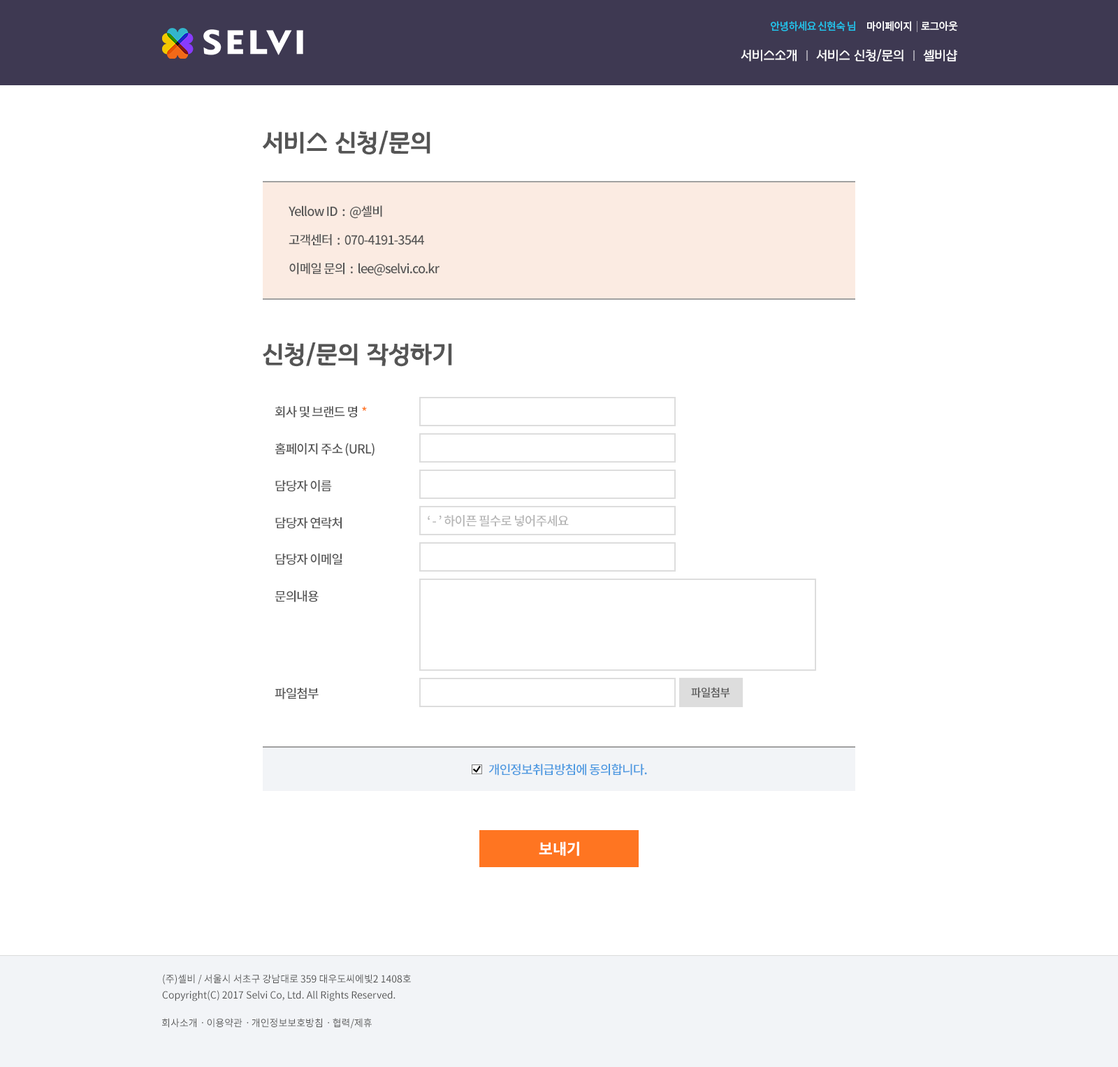
<style>
.page{position:relative;width:1118px;height:1067px;background:#ffffff}
.page>*{position:absolute;margin:0}
.t1{font:10.5px "NotoSansCJKkr-Medium";letter-spacing:-0.05em;color:#21c0e8}
.t2{font:10.5px "NotoSansCJKkr-Medium";letter-spacing:-0.05em;color:#ffffff}
.t3{font:12.6px "KHNPHDotfR";color:#ffffff}
.t4{font:24.3px "KHNPHDotfB";color:#555555}
.t5{font:12.6px/28.6px "NotoSansCJKkr-Medium";letter-spacing:-0.05em;color:#555555}
.t6{font:12.6px/36.9px "NotoSansCJKkr-Medium";letter-spacing:-0.05em;color:#555555}
.t7{font:12.6px/29.9px "NotoSansCJKkr-Medium";letter-spacing:-0.05em;color:#555555}
.t8{font:12.6px "NotoSansCJKkr-Medium";letter-spacing:-0.05em;color:#ff7521}
.t9{font:12.6px "NotoSansCJKkr-Medium";letter-spacing:-0.05em;color:#b6b6b6}
.t10{font:11.2px "NotoSansCJKkr-Medium";letter-spacing:-0.05em;color:#555555}
.t11{font:12.6px "NotoSansCJKkr-Medium";letter-spacing:-0.05em;color:#4e9ae1}
.t12{font:15.4px "NotoSansCJKkr-Bold";color:#ffffff}
.t13{font:9.8px/16.1px "NotoSansCJKkr-Regular";color:#515151}
.t14{font:9.8px "NotoSansCJKkr-Regular";color:#515151}
</style>
<div class="page">
<p class="t1" style="left:771px;top:21px;width:84px;height:10px">안녕하세요 신현숙 님</p>
<p class="t2" style="left:867px;top:21px;width:44px;height:10px">마이페이지</p>
<p class="t2" style="left:921px;top:21px;width:37px;height:10px">로그아웃</p>
<p class="t3" style="left:741px;top:49px;width:216px;height:13px">서비스소개     서비스 신청/문의     셀비샵</p>
<p class="t4" style="left:262px;top:131px;width:168px;height:24px">서비스 신청/문의</p>
<p class="t5" style="left:289px;top:205px;width:150px;height:71px">Yellow ID  :  @셀비<br>고객센터  :  070-4191-3544<br>이메일 문의  :  lee@selvi.co.kr</p>
<p class="t4" style="left:263px;top:342px;width:189px;height:25px">신청/문의 작성하기</p>
<p class="t6" style="left:275px;top:406px;width:99px;height:293px">회사 및 브랜드 명<br>홈페이지 주소 (URL)<br>담당자 이름<br>담당자 연락처<br>담당자 이메일<br>문의내용<br><br><span class="t7"><br>파일첨부</span></p>
<p class="t8" style="left:362px;top:406px;width:5px;height:5px">*</p>
<p class="t9" style="left:428px;top:515px;width:141px;height:12px">‘ - ’ 하이픈 필수로 넣어주세요</p>
<p class="t10" style="left:691px;top:687px;width:39px;height:11px">파일첨부</p>
<p class="t11" style="left:488px;top:764px;width:159px;height:11px">개인정보취급방침에 동의합니다.</p>
<p class="t12" style="left:539px;top:841px;width:40px;height:15px">보내기</p>
<p class="t13" style="left:162px;top:974px;width:249px;height:27px">(주)셀비 / 서울시 서초구 강남대로 359 대우도씨에빛2 1408호<br>Copyright(C) 2017 Selvi Co, Ltd. All Rights Reserved.</p>
<p class="t14" style="left:162px;top:1018px;width:210px;height:10px">회사소개ㆍ이용약관ㆍ개인정보보호방침ㆍ협력/제휴</p>
</div>
